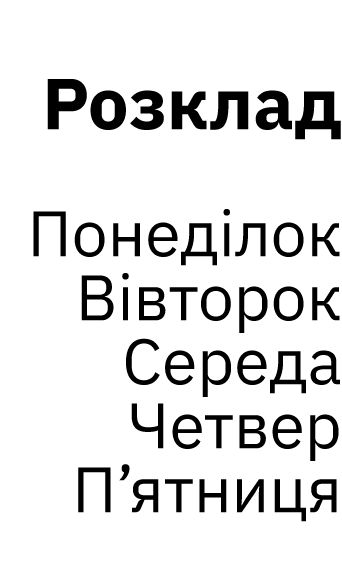
<style>
.page{position:relative;width:342px;height:576px;background:#ffffff}
.page>*{position:absolute;margin:0}
.t1{font:72px "IBMPlexSans-Bold";color:#000000}
.t2{font:64px/64px "IBMPlexSans";color:#000000}
</style>
<div class="page">
<p class="t1" style="left:47px;top:79px;width:294px;height:61px">Розклад</p>
<p class="t2" style="left:33px;top:209px;width:307px;height:313px;text-align:right">Понеділок<br>Вівторок<br>Середа<br>Четвер<br>П’ятниця</p>
</div>
